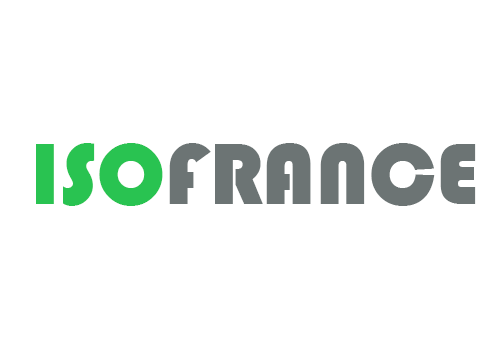
<style>
.page{position:relative;width:504px;height:360px;background:#ffffff}
.page>*{position:absolute;margin:0}
.t1{font:90px "Bauhaus93";color:#6c7474}
.t2{font:90px "Bauhaus93";color:#29c351}
</style>
<div class="page">
<p class="t1" style="left:36px;top:143px;width:440px;height:63px"><span class="t2">ISO</span>FRANCE</p>
</div>
